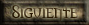
<style>
.page{position:relative;width:89px;height:25px}
.page>*{position:absolute;margin:0}
.t1{font:17px "Morpheus"}
</style>
<div class="page">
<p class="t1" style="left:12px;top:5px;width:66px;height:16px">Siguiente</p>
</div>
